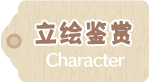
<style>
.page{position:relative;width:149px;height:82px}
.page>*{position:absolute;margin:0}
.t1{font:26.1px "shetumodengxiaofangti";color:#a07864;font-weight:bold;scale:0.94 1}
</style>
<div class="page">
<p class="t1" style="left:35px;top:20px;width:97px;height:25px">立绘鉴赏</p>
</div>
